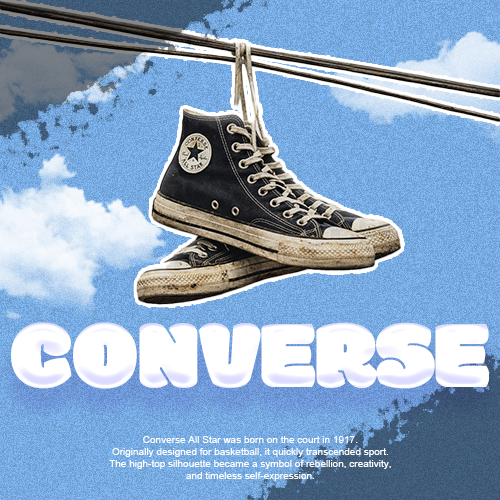
<style>
.page{position:relative;width:500px;height:500px}
.page>*{position:absolute;margin:0}
.t1{font:100px "Modak";color:#ffffff}
.t2{font:10px "ArialMT";color:#ffffff}
</style>
<div class="page">
<p class="t1" style="left:11px;top:322px;width:478px;height:67px">CONVERSE</p>
<p class="t1" style="left:11px;top:322px;width:478px;height:67px">CONVERSE</p>
<p class="t2" style="left:109px;top:436px;width:282px;height:45px;text-align:center">Converse All Star was born on the court in 1917.<br>Originally designed for basketball, it quickly transcended sport.<br>The high-top silhouette became a symbol of rebellion, creativity,<br>and timeless self-expression.</p>
</div>
